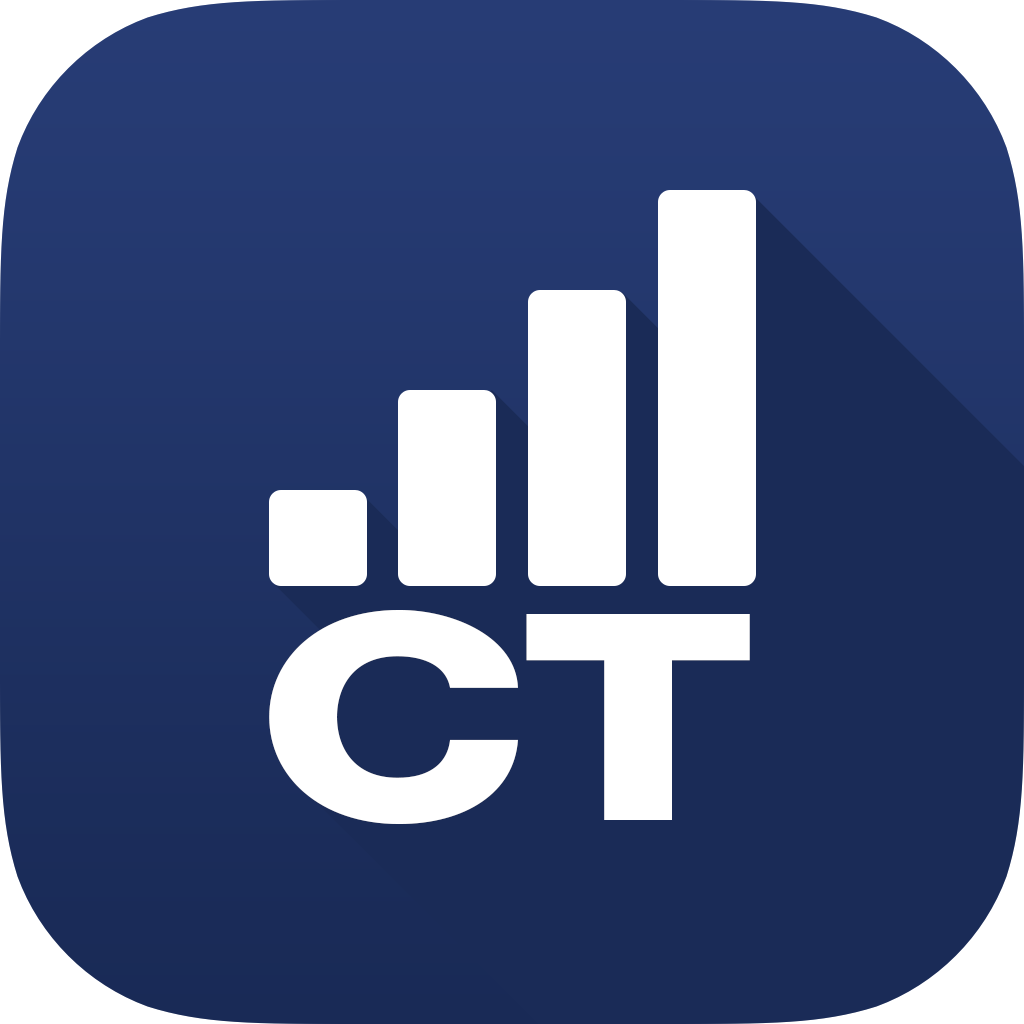
<style>
.page{position:relative;width:1024px;height:1024px;background:#1a2b57}
.page>*{position:absolute;margin:0}
.t1{font:288.8px "HelveticaNeue-Heavy";letter-spacing:-0.03em;color:#ffffff;scale:1.26 1}
</style>
<div class="page">
<p class="t1" style="left:269px;top:610px;width:481px;height:215px">CT</p>
</div>
